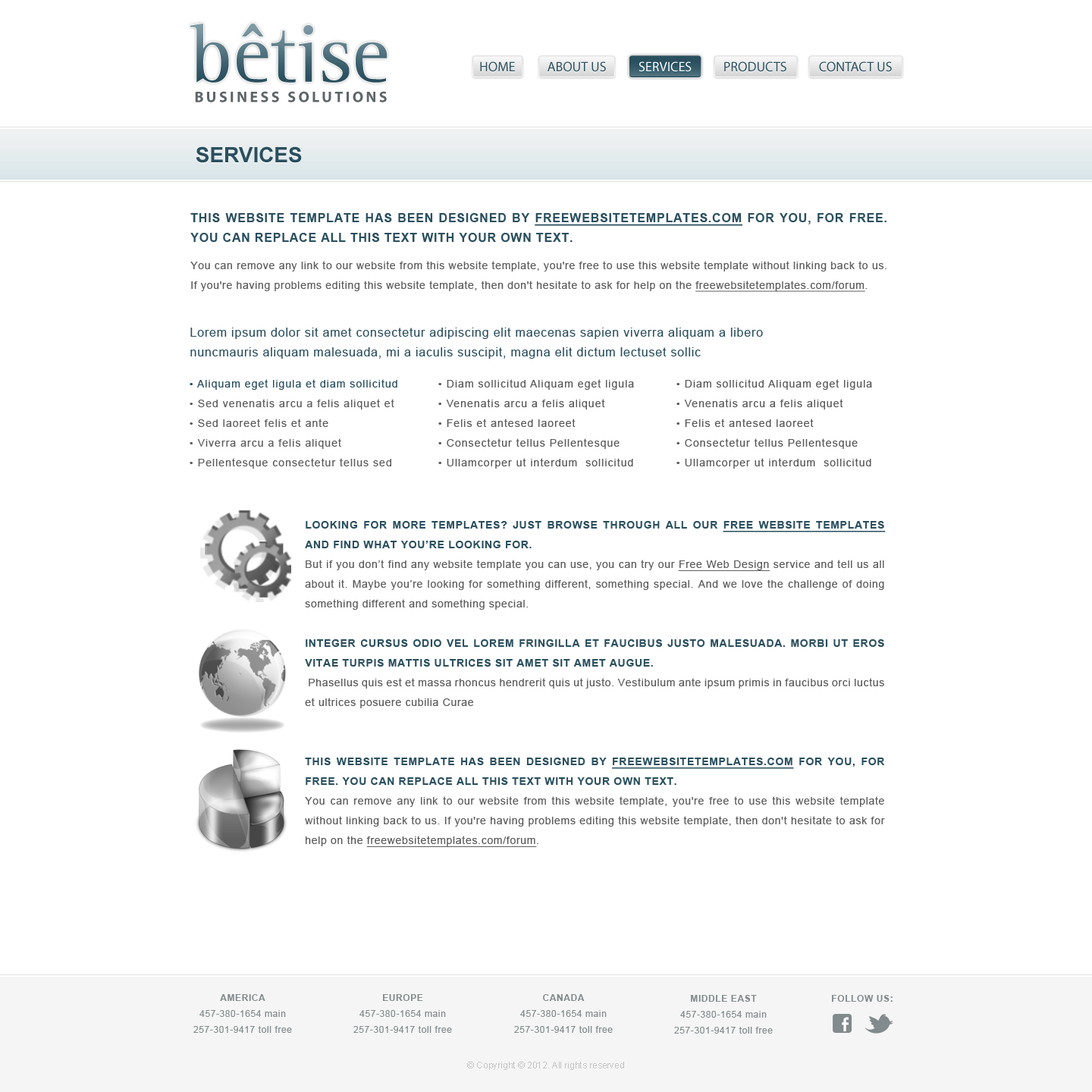
<style>
.page{position:relative;width:1092px;height:1092px;background:#ffffff}
.page>*{position:absolute;margin:0}
.t1{font:83.4px "LeftistMonoSerif"}
.t2{font:13.6px "MyriadPro-Regular";color:#2a4f5e}
.t3{font:13.6px "MyriadPro-Regular";color:#ffffff}
.t4{font:15.2px "MyriadPro-Bold";letter-spacing:0.17em;color:#5d6568;text-transform:uppercase}
.t5{font:21.2px "Arial-BoldMT";color:#2a4f5e;text-transform:uppercase}
.t6{font:10.6px/19.7px "ArialMT";letter-spacing:0.05em;color:#5d5d5d}
.t7{font:12.1px/19.7px "Arial-BoldMT";letter-spacing:0.05em;color:#2a4f5e;text-transform:uppercase}
.t8{font:12.1px/19.7px "Arial-BoldMT";letter-spacing:0.05em;color:#2a4f5e;text-transform:uppercase;text-decoration:underline}
.t9{font:10.6px/19.7px "ArialMT";letter-spacing:0.05em;color:#5d5d5d;text-decoration:underline}
.t10{font:12.1px/19.7px "ArialMT";letter-spacing:0.05em;color:#2a4f5e}
.t11{font:10.6px/19.7px "ArialMT";letter-spacing:0.075em;color:#5d5d5d}
.t12{font:10.6px/19.7px "ArialMT";letter-spacing:0.075em;color:#2a4f5e}
.t13{font:10.6px/19px "ArialMT";letter-spacing:0.075em;color:#5d5d5d}
.t14{font:10.6px/19.7px "ArialMT";letter-spacing:0.075em;color:#5a5a5a}
.t15{font:10.6px/19.7px "Arial-BoldMT";letter-spacing:0.05em;color:#2a4f5e;text-transform:uppercase}
.t16{font:10.6px/19.7px "Arial-BoldMT";letter-spacing:0.05em;color:#2a4f5e;text-transform:uppercase;text-decoration:underline}
.t17{font:9.1px/15.9px "ArialMT";letter-spacing:0.05em;color:#818a8c}
.t18{font:9.1px/15.9px "Arial-BoldMT";letter-spacing:0.05em;color:#818a8c;text-transform:uppercase}
.t19{font:9.1px "Arial-BoldMT";letter-spacing:0.05em;color:#818a8c;text-transform:uppercase}
.t20{font:9.1px "ArialMT";color:#c1c1c1}
</style>
<div class="page">
<p class="t1" style="left:190px;top:24px;width:198px;height:59px">bêtise</p>
<p class="t2" style="left:480px;top:61px;width:412px;height:11px">HOME           ABOUT US           SERVICES           PRODUCTS           CONTACT US</p>
<p class="t3" style="left:639px;top:61px;width:53px;height:11px">SERVICES</p>
<p class="t4" style="left:195px;top:91px;width:192px;height:11px">Business Solutions</p>
<p class="t5" style="left:196px;top:146px;width:106px;height:17px">Services</p>
<p class="t6" style="left:190px;top:213px;width:696px;height:79px;text-align:justify"><span class="t7">This website template has been designed by </span><span class="t8">freewebsitetemplates.com</span><span class="t7"> for you, for free. You can replace all this text with your own text. <br></span>You can remove any link to our website from this website template, you're free to use this website template without linking back to us. If you're having problems editing this website template, then don't hesitate to ask for help on the <span class="t9">freewebsitetemplates.com/forum</span>.</p>
<p class="t10" style="left:190px;top:328px;width:573px;height:31px">Lorem ipsum dolor sit amet consectetur adipiscing elit maecenas sapien viverra aliquam a libero<br>nuncmauris aliquam malesuada, mi a iaculis suscipit, magna elit dictum lectuset sollic</p>
<p class="t11" style="left:190px;top:379px;width:207px;height:90px"><span class="t12">• Aliquam eget ligula et diam sollicitud <br></span>• Sed venenatis arcu a felis aliquet et <br>• Sed laoreet felis et ante<br><span class="t13">• </span>Viverra arcu a felis aliquet<br>• Pellentesque consectetur tellus sed</p>
<p class="t14" style="left:438px;top:379px;width:196px;height:90px">• Diam sollicitud Aliquam eget ligula<br>• Venenatis arcu a felis aliquet<br>• Felis et antesed laoreet <br>• Consectetur tellus Pellentesque<br>• Ullamcorper ut interdum  sollicitud</p>
<p class="t14" style="left:676px;top:379px;width:196px;height:90px">• Diam sollicitud Aliquam eget ligula<br>• Venenatis arcu a felis aliquet<br>• Felis et antesed laoreet <br>• Consectetur tellus Pellentesque<br>• Ullamcorper ut interdum  sollicitud</p>
<p class="t6" style="left:305px;top:521px;width:581px;height:326px;text-align:justify"><span class="t15">Looking for more templates? Just browse through all our </span><span class="t16">Free Website Templates </span><span class="t15">and find what you’re looking for.<br></span>But if you don’t find any website template you can use, you can try our <span class="t9">Free Web Design</span> service and tell us all about it. Maybe you’re looking for something different, something special. And we love the challenge of doing something different and something special.<br><br><span class="t15">Integer cursus odio vel lorem fringilla et faucibus justo malesuada. Morbi ut eros vitae turpis mattis ultrices sit amet sit amet augue. <br></span> Phasellus quis est et massa rhoncus hendrerit quis ut justo. Vestibulum ante ipsum primis in faucibus orci luctus et ultrices posuere cubilia Curae<br><br><br><span class="t15">This website template has been designed by </span><span class="t16">freewebsitetemplates.com</span><span class="t15"> for you, for free. You can replace all this text with your own text.<br></span>You can remove any link to our website from this website template, you're free to use this website template without linking back to us. If you're having problems editing this website template, then don't hesitate to ask for help on the <span class="t9">freewebsitetemplates.com/forum</span>.</p>
<p class="t17" style="left:193px;top:994px;width:99px;height:39px;text-align:center"><span class="t18">America<br></span>457-380-1654 main<br>257-301-9417 toll free</p>
<p class="t17" style="left:353px;top:994px;width:99px;height:39px;text-align:center"><span class="t18">Europe<br></span>457-380-1654 main<br>257-301-9417 toll free</p>
<p class="t17" style="left:514px;top:994px;width:99px;height:39px;text-align:center"><span class="t18">Canada<br></span>457-380-1654 main<br>257-301-9417 toll free</p>
<p class="t17" style="left:674px;top:995px;width:99px;height:39px;text-align:center"><span class="t18">Middle East<br></span>457-380-1654 main<br>257-301-9417 toll free</p>
<p class="t19" style="left:832px;top:995px;width:61px;height:7px">Follow us:</p>
<p class="t20" style="left:467px;top:1062px;width:157px;height:8px">© Copyright © 2012. All rights reserved</p>
</div>
